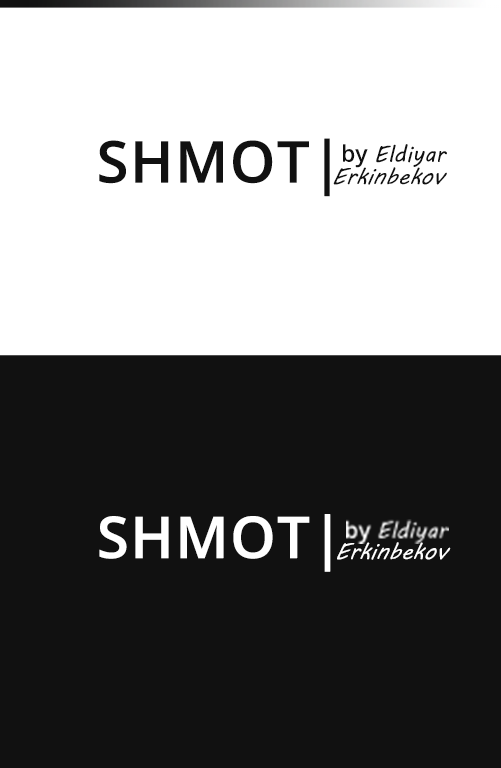
<style>
.page{position:relative;width:501px;height:768px;background:#111111}
.page>*{position:absolute;margin:0}
.t1{font:57.6px "OpenSans-Semibold";color:#111111;font-weight:bold}
.t2{font:23px "MVBoli";color:#111111}
.t3{font:23px "OpenSans-Semibold";color:#111111}
.t4{font:23px "MVBoli";color:#111111;font-style:italic}
.t5{font:57.6px "OpenSans-Semibold";color:#ffffff;font-weight:bold}
.t6{font:23px "MVBoli";color:#ffffff;font-style:italic}
</style>
<div class="page">
<p class="t1" style="left:99px;top:138px;width:231px;height:59px">SHMOT|</p>
<p class="t2" style="left:343px;top:144px;width:104px;height:24px"><span class="t3">by </span>Eldiyar</p>
<p class="t4" style="left:333px;top:167px;width:114px;height:18px">Erkinbekov</p>
<p class="t5" style="left:99px;top:514px;width:232px;height:58px">SHMOT|</p>
<p class="t6" style="left:337px;top:542px;width:114px;height:18px">Erkinbekov</p>
</div>
